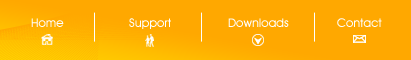
<style>
.page{position:relative;width:411px;height:60px;background:#ffa800}
.page>*{position:absolute;margin:0}
.t1{font:12px "AvantGardeITCbyBT-Medium";color:#ffffff}
</style>
<div class="page">
<p class="t1" style="left:31px;top:18px;width:33px;height:9px">Home</p>
<p class="t1" style="left:129px;top:18px;width:42px;height:11px">Support</p>
<p class="t1" style="left:228px;top:18px;width:61px;height:9px">Downloads</p>
<p class="t1" style="left:337px;top:18px;width:45px;height:9px">Contact</p>
</div>
